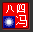
<style>
.page{position:relative;width:33px;height:32px;background:#f20000}
.page>*{position:absolute;margin:0}
.t1{font:10.4px "SimSun";color:#ffffff}
.t2{font:11.7px "SimSun";color:#ffffff}
</style>
<div class="page">
<p class="t1" style="left:6px;top:4px;width:19px;height:9px">八四</p>
<p class="t2" style="left:16px;top:15px;width:11px;height:12px">冯</p>
</div>
